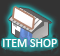
<style>
.page{position:relative;width:60px;height:56px}
.page>*{position:absolute;margin:0}
.t1{font:12px "Calibri";color:#ffffff}
</style>
<div class="page">
<p class="t1" style="left:3px;top:39px;width:54px;height:8px">ITEM SHOP</p>
</div>
